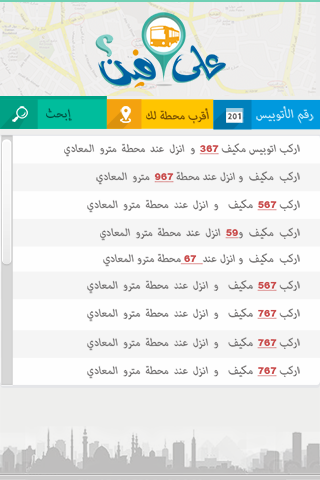
<style>
.page{position:relative;width:320px;height:480px;background:#fefefe}
.page>*{position:absolute;margin:0}
.t1{font:16px "Arial-BlackItalic";letter-spacing:0.025em;color:#014f41}
.t2{font:16px "Arial-BlackItalic";color:#714a03}
.t3{font:17.2px "Arial-BlackItalic";color:#bde8fb}
.t4{font:14.9px "Arial-BlackItalic";color:#6b6969}
.t5{font:9.3px "ArialMT-Black";color:#c94a4a;text-decoration:underline}
</style>
<div class="page">
<p class="t1" style="left:46px;top:108px;width:26px;height:13px">إبحث</p>
<p class="t1" style="left:46px;top:108px;width:26px;height:13px">إبحث</p>
<p class="t2" style="left:146px;top:108px;width:63px;height:16px">أقرب محطة لك</p>
<p class="t3" style="left:256px;top:106px;width:58px;height:18px">رقم الأتوبيس</p>
<p class="t4" style="left:64px;top:143px;width:236px;height:14px">اركب اتوبيس مكيف <span class="t5">367</span> و انزل عند محطة مترو المعادي</p>
<p class="t4" style="left:96px;top:171px;width:204px;height:14px">اركب  مكيف  و انزل عند محطة <span class="t5">967</span> مترو المعادي</p>
<p class="t4" style="left:87px;top:199px;width:213px;height:14px">اركب <span class="t5">567</span> مكيف  و انزل عند محطة مترو المعادي</p>
<p class="t4" style="left:100px;top:227px;width:200px;height:14px">اركب  مكيف  و<span class="t5">59</span> انزل عند محطة مترو المعادي</p>
<p class="t4" style="left:103px;top:253px;width:197px;height:14px">اركب  مكيف  و انزل عند<span class="t5">  67 </span>محطة مترو المعادي</p>
<p class="t4" style="left:87px;top:280px;width:213px;height:14px">اركب <span class="t5">567</span> مكيف  و انزل عند محطة مترو المعادي</p>
<p class="t4" style="left:87px;top:308px;width:213px;height:14px">اركب <span class="t5">767</span> مكيف  و انزل عند محطة مترو المعادي</p>
<p class="t4" style="left:87px;top:337px;width:213px;height:14px">اركب <span class="t5">767</span> مكيف  و انزل عند محطة مترو المعادي</p>
<p class="t4" style="left:87px;top:365px;width:213px;height:14px">اركب <span class="t5">767</span> مكيف  و انزل عند محطة مترو المعادي</p>
</div>
